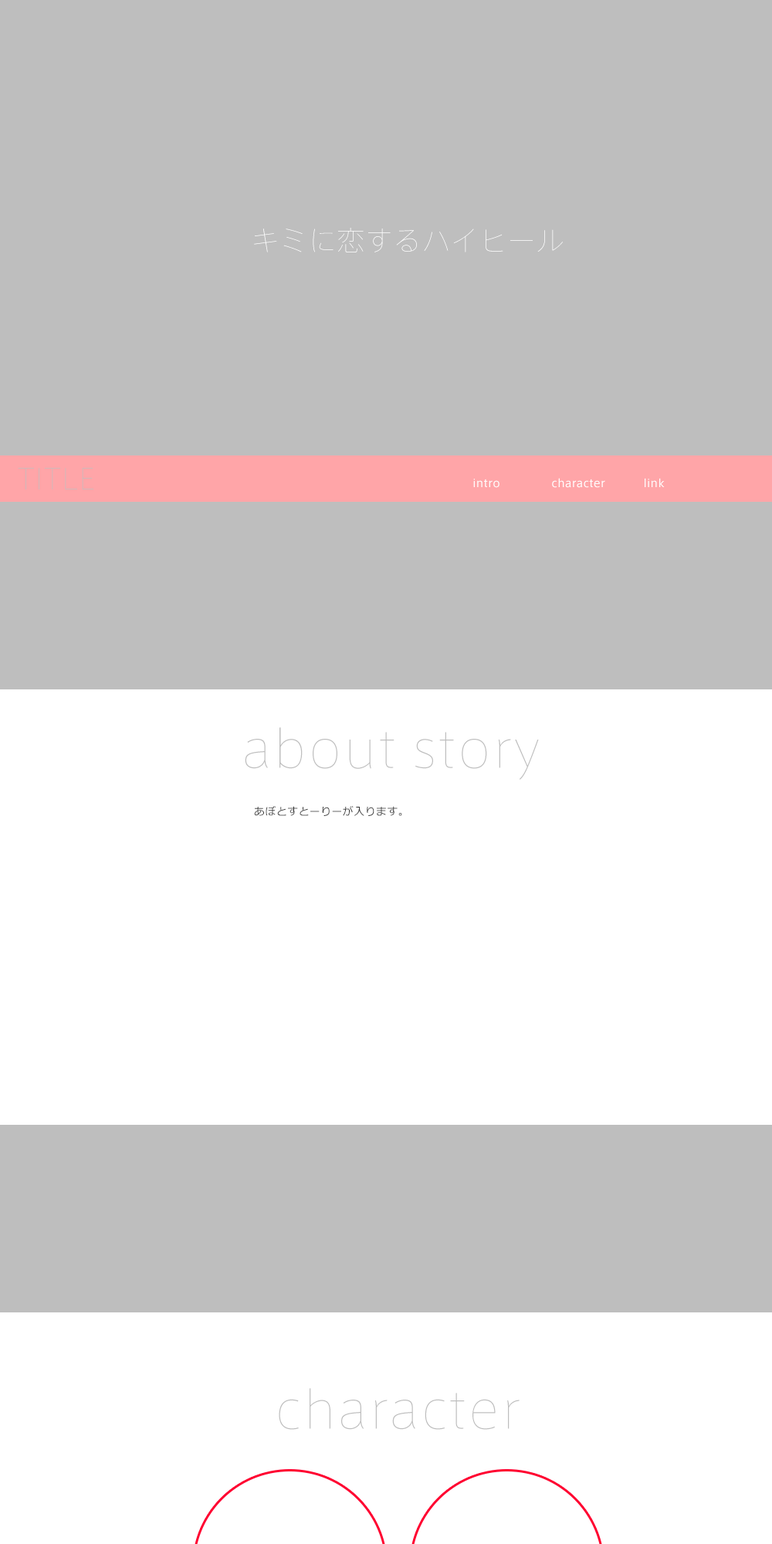
<style>
.page{position:relative;width:772px;height:1544px;background:#bebebe}
.page>*{position:absolute;margin:0}
.t1{font:27.8px "AxisStd-UltraLight";letter-spacing:0.025em;color:#ffffff}
.t2{font:27.8px "AxisStd-UltraLight";letter-spacing:0.025em;color:#bebebe}
.t3{font:10.8px "AxisStd-Regular";letter-spacing:0.025em;color:#ffffff}
.t4{font:49.8px "AxisStd-UltraLight";letter-spacing:0.025em;color:#bebebe}
.t5{font:10.8px "Meiryo";letter-spacing:0.025em;color:#333333}
</style>
<div class="page">
<p class="t1" style="left:254px;top:228px;width:309px;height:24px">キミに恋するハイヒール</p>
<p class="t2" style="left:18px;top:468px;width:76px;height:22px">TITLE</p>
<p class="t3" style="left:473px;top:479px;width:27px;height:9px">intro</p>
<p class="t3" style="left:552px;top:478px;width:53px;height:10px">character</p>
<p class="t3" style="left:645px;top:478px;width:20px;height:9px">link</p>
<p class="t4" style="left:245px;top:727px;width:294px;height:53px">about story</p>
<p class="t5" style="left:254px;top:806px;width:148px;height:10px">あぼとすとーりーが入ります。</p>
<p class="t4" style="left:279px;top:1388px;width:241px;height:42px">character</p>
</div>
